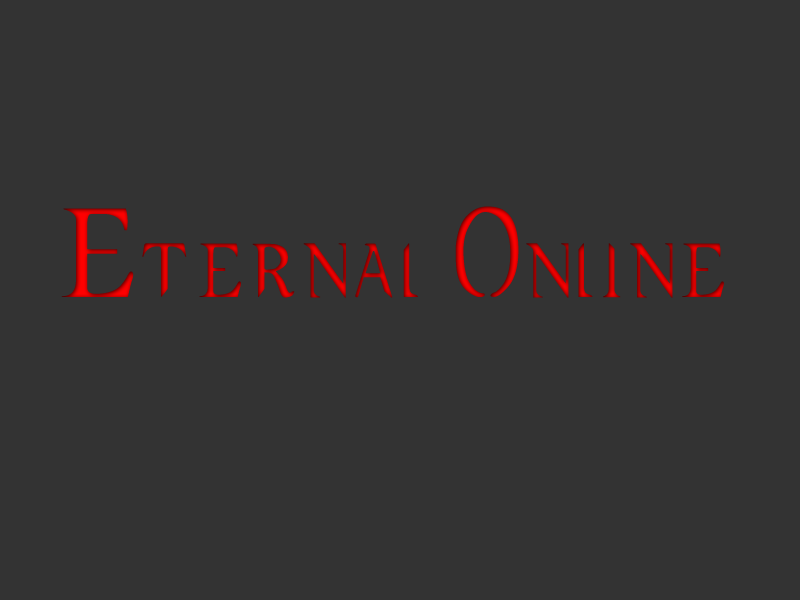
<style>
.page{position:relative;width:800px;height:600px;background:#333333}
.page>*{position:absolute;margin:0}
.t1{font:83.3px "SupernaturalKnight";letter-spacing:0.01em;font-weight:bold}
</style>
<div class="page">
<p class="t1" style="left:61px;top:206px;width:663px;height:92px">Eternal Online</p>
</div>
